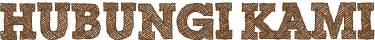
<style>
.page{position:relative;width:375px;height:40px;background:#ffffff}
.page>*{position:absolute;margin:0}
.t1{font:50px "ScribbleBoxDEMO";color:#684121}
</style>
<div class="page">
<p class="t1" style="left:0px;top:2px;width:375px;height:39px">Hubungi Kami</p>
</div>
